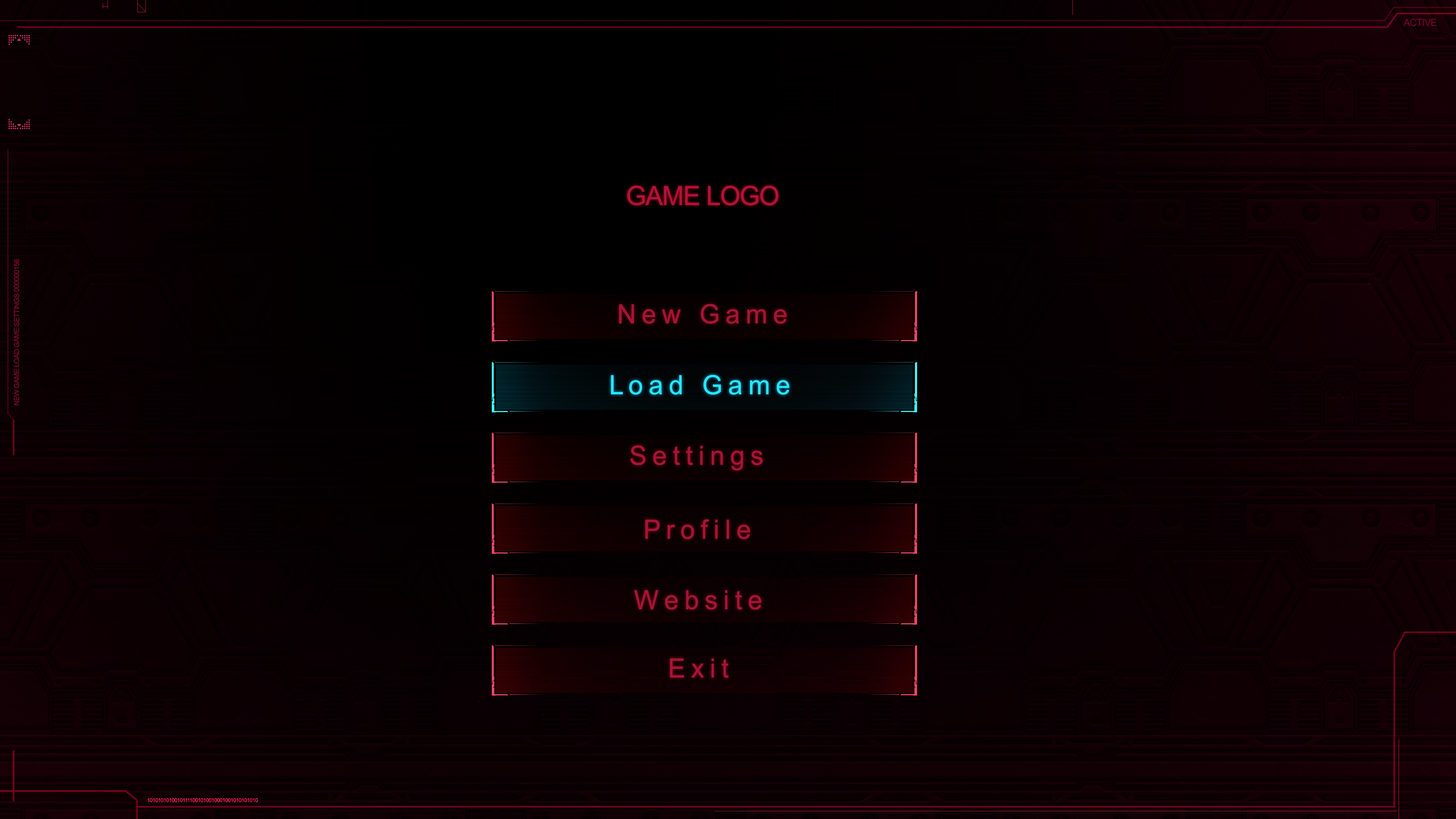
<style>
.page{position:relative;width:1456px;height:819px}
.page>*{position:absolute;margin:0}
.t1{font:9.8px "ArialNarrow";letter-spacing:-0.025em;color:#6c0825;scale:1.2 1}
.t2{font:26.6px "ArialNarrow";letter-spacing:-0.025em;color:#b71038;scale:1.2 1}
.t3{font:7px "ArialNarrow";letter-spacing:-0.025em;color:#7d0c2a;scale:1.2 1}
.t4{font:26.6px "ArialNarrow";letter-spacing:-0.025em;color:#a71437;scale:1.2 1}
.t5{font:26.6px "ArialNarrow";letter-spacing:-0.025em;color:#25e8ff;scale:1.2 1}
.t6{font:26.6px "ArialNarrow";letter-spacing:-0.025em;color:#a71438;scale:1.2 1}
.t7{font:26.6px "ArialNarrow";letter-spacing:-0.025em;color:#a81438;scale:1.2 1}
.t8{font:5.3px "ArialNarrow";letter-spacing:-0.025em;color:#ff255d;scale:1.2 1}
</style>
<div class="page">
<p class="t1" style="left:1403px;top:19px;width:34px;height:7px">ACTIVE</p>
<p class="t2" style="left:627px;top:185px;width:151px;height:21px">GAME LOGO</p>
<p class="t3" style="left:14px;top:259px;width:5px;height:146px;rotate:-90deg">NEW GAME LOAD GAME SETTINGS 000000156</p>
<p class="t4" style="left:619px;top:304px;width:168px;height:20px">N e w   G a m e</p>
<p class="t5" style="left:611px;top:375px;width:178px;height:20px">L o a d   G a m e</p>
<p class="t4" style="left:630px;top:445px;width:133px;height:26px">S e t t i n g s</p>
<p class="t6" style="left:645px;top:519px;width:105px;height:20px">P r o f i l e</p>
<p class="t6" style="left:634px;top:590px;width:127px;height:20px">W e b s i t e</p>
<p class="t7" style="left:670px;top:658px;width:59px;height:20px">E x i t</p>
<p class="t8" style="left:147px;top:798px;width:111px;height:4px">10101010100101111001010010001001010101010</p>
</div>
